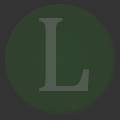
<style>
.page{position:relative;width:120px;height:120px;background:#333333}
.page>*{position:absolute;margin:0}
.t1{font:109.2px "Cambria";color:#515c50;text-transform:uppercase}
</style>
<div class="page">
<p class="t1" style="left:39px;top:18px;width:50px;height:73px">L</p>
</div>
